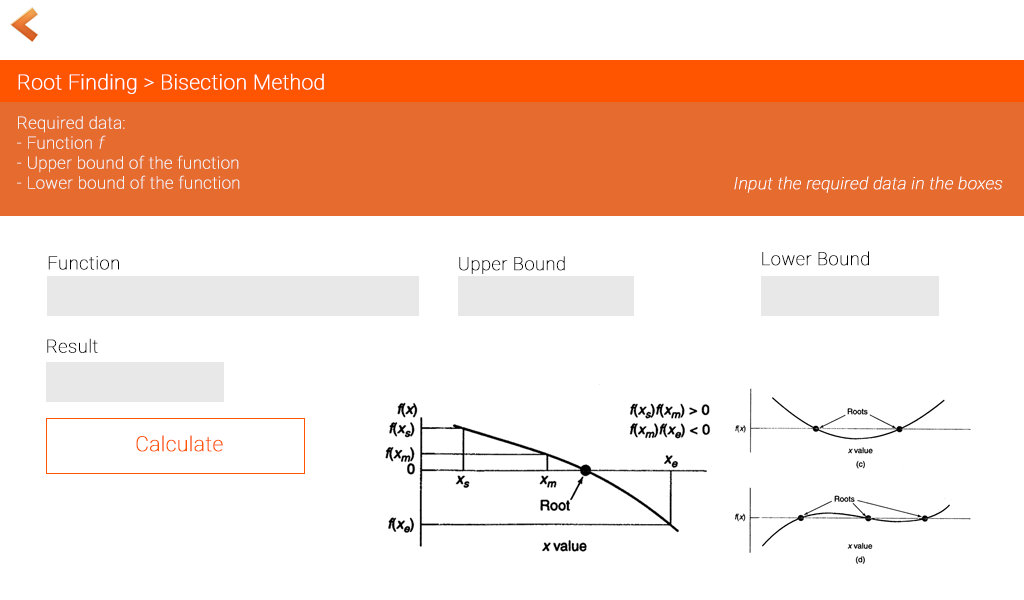
<style>
.page{position:relative;width:1024px;height:600px;background:#ffffff}
.page>*{position:absolute;margin:0}
.t1{font:20.8px "Roboto-Thin";color:#ffffff;font-weight:bold}
.t2{font:16.7px "Roboto-Thin";color:#f3f3f3;font-weight:bold}
.t3{font:16.7px "Roboto-Thin";color:#f3f3f3;font-weight:bold;font-style:italic}
.t4{font:16.7px "Roboto-Thin";color:#ffffff;font-weight:bold;font-style:italic}
.t5{font:18.3px "Roboto-Thin";color:#000000;font-weight:bold}
.t6{font:20.8px "Roboto-Thin";color:#ff5500;font-weight:bold}
</style>
<div class="page">
<p class="t1" style="left:18px;top:73px;width:306px;height:21px">Root Finding &gt; Bisection Method</p>
<p class="t2" style="left:17px;top:116px;width:223px;height:73px">Required data:<br>- Function <span class="t3">f</span><br>- Upper bound of the function<br>- Lower bound of the function</p>
<p class="t4" style="left:734px;top:176px;width:269px;height:17px">Input the required data in the boxes</p>
<p class="t5" style="left:48px;top:256px;width:71px;height:14px">Function</p>
<p class="t5" style="left:459px;top:256px;width:106px;height:18px">Upper Bound</p>
<p class="t5" style="left:762px;top:251px;width:107px;height:15px">Lower Bound</p>
<p class="t5" style="left:47px;top:338px;width:51px;height:15px">Result</p>
<p class="t6" style="left:136px;top:435px;width:87px;height:17px">Calculate</p>
</div>
